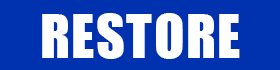
<style>
.page{position:relative;width:280px;height:70px;background:#0032b0}
.page>*{position:absolute;margin:0}
.t1{font:55.6px "Impact";letter-spacing:0.03em;color:#ffffff;text-transform:uppercase}
</style>
<div class="page">
<p class="t1" style="left:42px;top:13px;width:198px;height:46px">Restore</p>
</div>
